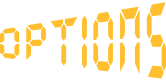
<style>
.page{position:relative;width:166px;height:81px;background:#ffffff}
.page>*{position:absolute;margin:0}
.t1{font:75px "QuartzMS";color:#ffbf2e;scale:0.57 1}
</style>
<div class="page">
<p class="t1" style="left:0px;top:2px;width:167px;height:77px">OPTIONS</p>
</div>
